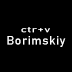
<style>
.page{position:relative;width:72px;height:72px;background:#000000}
.page>*{position:absolute;margin:0}
.t1{font:7.9px/8.3px "Bahnschrift";letter-spacing:0.05em;color:#000000;scale:1.51 1}
.t2{font:7.9px/8.3px "Bahnschrift";letter-spacing:0.05em;color:#ffffff;scale:1.51 1}
.t3{font:12px "Bahnschrift";letter-spacing:0.05em;color:#ffffff}
</style>
<div class="page">
<p class="t1" style="left:21px;top:16px;width:29px;height:17px">ctr+c<br><span class="t2">ctr+v</span></p>
<p class="t3" style="left:7px;top:36px;width:59px;height:11px">Borimskiy</p>
</div>
